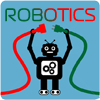
<style>
.page{position:relative;width:100px;height:100px;background:#61adcf}
.page>*{position:absolute;margin:0}
.t1{font:17.4px "MagistralC";letter-spacing:0.005em;font-weight:bold}
</style>
<div class="page">
<p class="t1" style="left:5px;top:8px;width:91px;height:14px">ROBOTICS</p>
</div>
